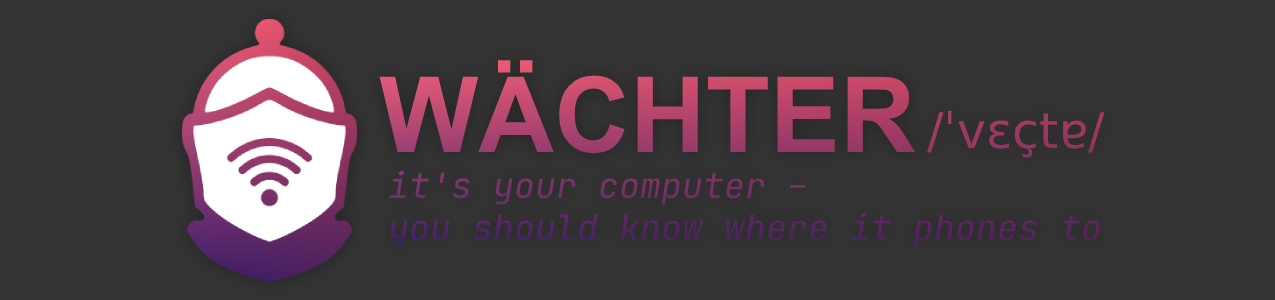
<style>
.page{position:relative;width:1275px;height:300px;background:#333333}
.page>*{position:absolute;margin:0}
.t1{font:105px "Arial-BoldMT"}
.t2{font:49px "DejaVuSans";color:#9c3861}
.t3{font:35px "JetBrainsMono-Italic"}
</style>
<div class="page">
<p class="t1" style="left:379px;top:60px;width:537px;height:94px">WÄCHTER</p>
<p class="t2" style="left:927px;top:110px;width:178px;height:48px">/ˈvɛçtɐ/</p>
<p class="t3" style="left:389px;top:170px;width:711px;height:77px">it's your computer –<br>you should know where it phones to</p>
</div>
